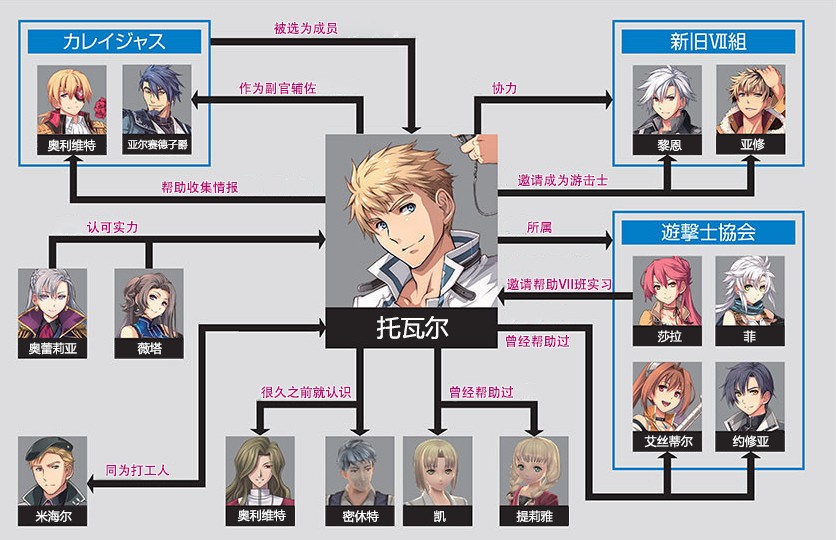
<style>
.page{position:relative;width:836px;height:540px;background:#dddddf}
.page>*{position:absolute;margin:0}
.t1{font:13px "AdobeHeitiStd-Regular";color:#b70773}
.t2{font:12px "MicrosoftYaHei";color:#ffffff}
.t3{font:10px "MicrosoftYaHei";color:#ffffff}
.t4{font:24px "MicrosoftYaHei";color:#ffffff}
</style>
<div class="page">
<p class="t1" style="left:274px;top:22px;width:64px;height:13px">被选为成员</p>
<p class="t1" style="left:239px;top:82px;width:77px;height:13px">作为副官辅佐</p>
<p class="t1" style="left:492px;top:82px;width:25px;height:13px">协力</p>
<p class="t2" style="left:47px;top:139px;width:49px;height:13px">奥利维特</p>
<p class="t3" style="left:127px;top:139px;width:61px;height:11px">亚尔赛德子爵</p>
<p class="t2" style="left:657px;top:139px;width:25px;height:13px">黎恩</p>
<p class="t2" style="left:740px;top:138px;width:25px;height:13px">亚修</p>
<p class="t1" style="left:518px;top:174px;width:90px;height:13px">邀请成为游击士</p>
<p class="t1" style="left:161px;top:181px;width:77px;height:13px">帮助收集情报</p>
<p class="t1" style="left:87px;top:221px;width:51px;height:13px">认可实力</p>
<p class="t1" style="left:527px;top:221px;width:25px;height:13px">所属</p>
<p class="t1" style="left:507px;top:278px;width:105px;height:13px">邀请帮助VII班实习</p>
<p class="t4" style="left:377px;top:316px;width:72px;height:23px">托瓦尔</p>
<p class="t2" style="left:28px;top:342px;width:49px;height:13px">奥蕾莉亚</p>
<p class="t2" style="left:137px;top:342px;width:25px;height:13px">薇塔</p>
<p class="t1" style="left:506px;top:335px;width:64px;height:13px">曾经帮助过</p>
<p class="t2" style="left:657px;top:330px;width:25px;height:13px">莎拉</p>
<p class="t2" style="left:743px;top:330px;width:13px;height:13px">菲</p>
<p class="t1" style="left:260px;top:386px;width:92px;height:13px">很久之前就认识</p>
<p class="t1" style="left:450px;top:386px;width:64px;height:13px">曾经帮助过</p>
<p class="t2" style="left:644px;top:435px;width:49px;height:13px">艾丝蒂尔</p>
<p class="t2" style="left:732px;top:435px;width:37px;height:13px">约修亚</p>
<p class="t1" style="left:106px;top:464px;width:64px;height:13px">同为打工人</p>
<p class="t2" style="left:35px;top:510px;width:37px;height:13px">米海尔</p>
<p class="t2" style="left:237px;top:509px;width:49px;height:13px">奥利维特</p>
<p class="t2" style="left:342px;top:510px;width:37px;height:13px">密休特</p>
<p class="t2" style="left:434px;top:510px;width:12px;height:13px">凯</p>
<p class="t2" style="left:516px;top:510px;width:37px;height:13px">提莉雅</p>
</div>
